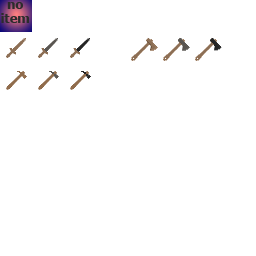
<style>
.page{position:relative;width:256px;height:256px;background:#ffffff}
.page>*{position:absolute;margin:0}
.t1{font:11.6px "Verdana-Bold";color:#2c2c2c}
</style>
<div class="page">
<p class="t1" style="left:1px;top:2px;width:29px;height:21px;text-align:center">no item</p>
</div>
